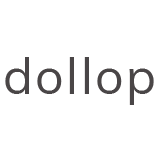
<style>
.page{position:relative;width:160px;height:160px;background:#ffffff}
.page>*{position:absolute;margin:0}
.t1{font:50px "Muli-Regular";letter-spacing:0.05em;color:#4a4647}
</style>
<div class="page">
<p class="t1" style="left:5px;top:57px;width:149px;height:48px">dollop</p>
</div>
